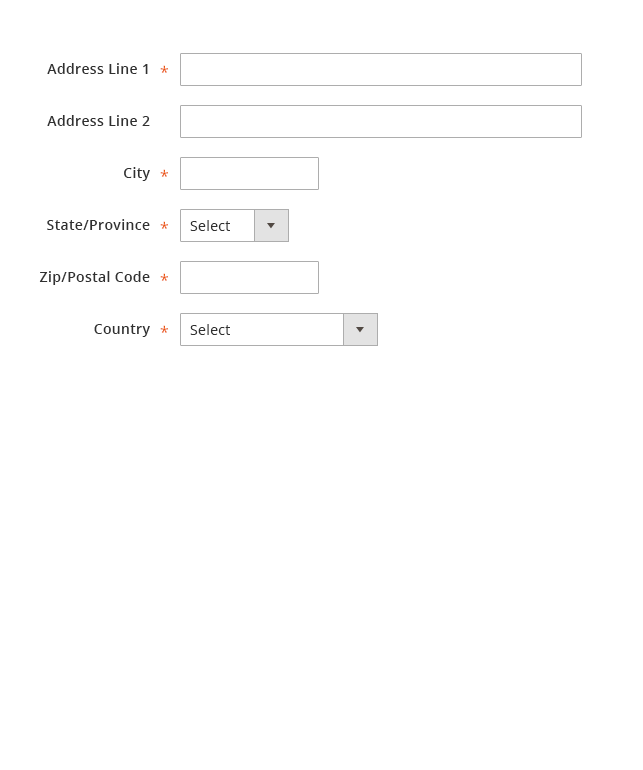
<style>
.page{position:relative;width:643px;height:770px;background:#ffffff}
.page>*{position:absolute;margin:0}
.t1{font:14px "OpenSans-Semibold";letter-spacing:0.025em;color:#303030}
.t2{font:16px "OpenSans";letter-spacing:0.025em;color:#eb5202}
.t3{font:14px "OpenSans";letter-spacing:0.025em;color:#303030}
</style>
<div class="page">
<p class="t1" style="left:47px;top:63px;width:101px;height:11px">Address Line 1</p>
<p class="t2" style="left:160px;top:65px;width:8px;height:8px">*</p>
<p class="t1" style="left:47px;top:115px;width:103px;height:11px">Address Line 2</p>
<p class="t1" style="left:124px;top:167px;width:26px;height:14px">City</p>
<p class="t2" style="left:160px;top:169px;width:8px;height:8px">*</p>
<p class="t1" style="left:47px;top:219px;width:103px;height:11px">State/Province</p>
<p class="t2" style="left:160px;top:221px;width:8px;height:8px">*</p>
<p class="t3" style="left:190px;top:220px;width:40px;height:11px">Select</p>
<p class="t1" style="left:39px;top:271px;width:111px;height:14px">Zip/Postal Code</p>
<p class="t2" style="left:160px;top:273px;width:8px;height:8px">*</p>
<p class="t1" style="left:94px;top:324px;width:56px;height:13px">Country</p>
<p class="t2" style="left:160px;top:325px;width:8px;height:8px">*</p>
<p class="t3" style="left:190px;top:324px;width:40px;height:11px">Select</p>
</div>
